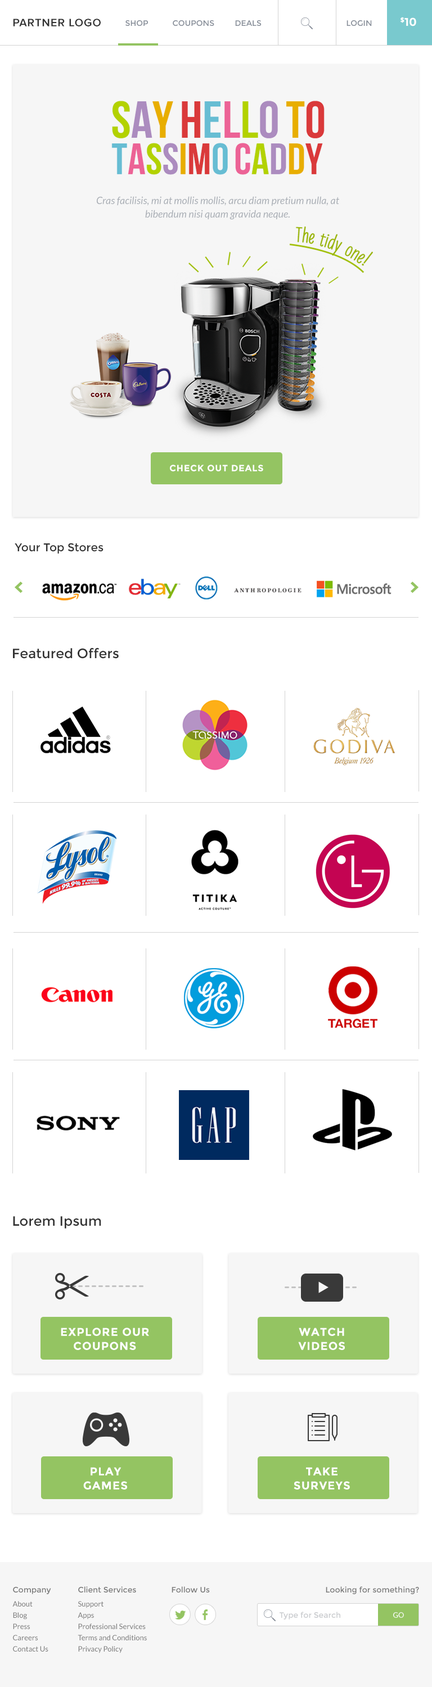
<style>
.page{position:relative;width:432px;height:1687px;background:#ffffff}
.page>*{position:absolute;margin:0}
.t1{font:11.3px "Montserrat-Bold";color:#ffffff;text-transform:uppercase}
.t2{font:11.3px "ProximaNova-Semibold";letter-spacing:0.05em;color:#313131;text-transform:uppercase}
.t3{font:7.9px "Montserrat-Regular";color:#8d959f;text-transform:uppercase}
.t4{font:7.9px "Montserrat-Regular";color:#868d98;text-transform:uppercase}
.t5{font:10.1px/13.5px "Lato-Italic";color:#a9aeb5}
.t6{font:9px "Montserrat-Bold";letter-spacing:0.06em;color:#ffffff;text-transform:uppercase}
.t7{font:11.3px "Montserrat-Regular";color:#313131}
.t8{font:13.5px "Montserrat-Regular";color:#313131}
.t9{font:11.3px/14.1px "Montserrat-Bold";letter-spacing:0.06em;color:#ffffff;text-transform:uppercase}
.t10{font:7.3px/11.3px "Lato-Regular";color:#797979}
.t11{font:7.9px/14.1px "Montserrat-Regular";color:#797979}
.t12{font:7.3px/14.1px "Lato-Regular";color:#797979}
.t13{font:7.9px "Montserrat-Regular";color:#797979}
.t14{font:7.9px "Montserrat-Regular";color:#c9cbce}
.t15{font:7.3px "Lato-Regular";color:#ffffff}
</style>
<div class="page">
<p class="t1" style="left:401px;top:17px;width:15px;height:9px">$10</p>
<p class="t2" style="left:13px;top:19px;width:88px;height:7px">PARTNER LOGO</p>
<p class="t3" style="left:125px;top:20px;width:23px;height:6px">SHOP</p>
<p class="t4" style="left:173px;top:20px;width:41px;height:6px">COUPONS</p>
<p class="t4" style="left:235px;top:20px;width:27px;height:6px">DEALS</p>
<p class="t4" style="left:347px;top:20px;width:25px;height:6px">LOGIN</p>
<p class="t5" style="left:97px;top:196px;width:242px;height:23px;text-align:center">Cras facilisis, mi at mollis mollis, arcu diam pretium nulla, at<br>bibendum nisi quam gravida neque.</p>
<p class="t6" style="left:170px;top:465px;width:93px;height:6px">Check Out Deals</p>
<p class="t7" style="left:15px;top:543px;width:89px;height:11px">Your Top Stores</p>
<p class="t8" style="left:13px;top:647px;width:106px;height:12px">Featured Offers</p>
<p class="t8" style="left:13px;top:1216px;width:88px;height:13px">Lorem Ipsum</p>
<p class="t9" style="left:61px;top:1328px;width:88px;height:22px;text-align:center">Explore our<br>coupons</p>
<p class="t9" style="left:298px;top:1328px;width:47px;height:22px;text-align:center">watch<br>videos</p>
<p class="t9" style="left:83px;top:1467px;width:44px;height:23px;text-align:center">Play<br>games</p>
<p class="t9" style="left:294px;top:1467px;width:56px;height:23px;text-align:center">take<br>surveys</p>
<p class="t10" style="left:12px;top:1587px;width:39px;height:65px"><span class="t11">Company<br></span><span class="t12">About<br></span>Blog<br>Press<br>Careers<br>Contact Us</p>
<p class="t10" style="left:78px;top:1586px;width:69px;height:67px"><span class="t11">Client Services<br></span><span class="t12">Support<br></span>Apps<br>Professional Services<br>Terms and Conditions<br>Privacy Policy</p>
<p class="t13" style="left:172px;top:1586px;width:38px;height:6px">Follow Us</p>
<p class="t13" style="left:326px;top:1586px;width:93px;height:8px">Looking for something?</p>
<p class="t14" style="left:280px;top:1612px;width:60px;height:7px">Type for Search</p>
<p class="t15" style="left:393px;top:1612px;width:11px;height:6px">GO</p>
</div>
